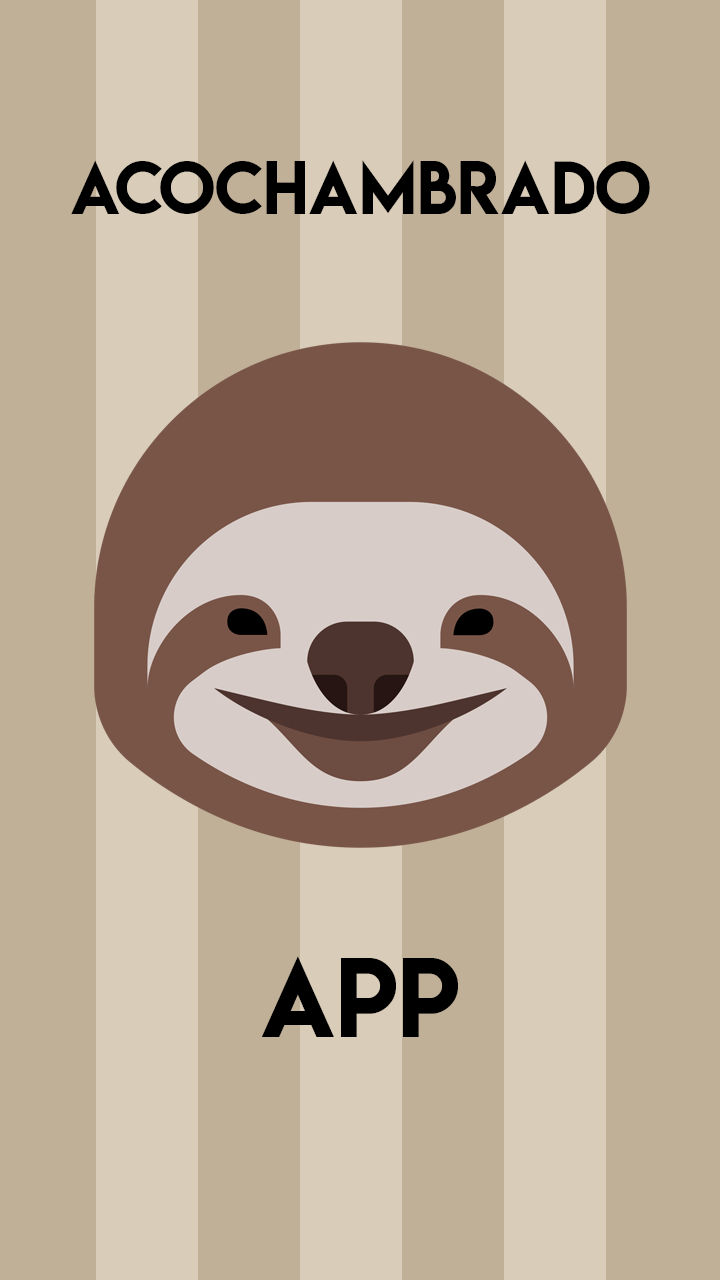
<style>
.page{position:relative;width:720px;height:1280px;background:#c1b098}
.page>*{position:absolute;margin:0}
.t1{font:66.7px "LemonMilk";color:#000000}
.t2{font:100px "LemonMilk";color:#000000}
</style>
<div class="page">
<p class="t1" style="left:71px;top:160px;width:579px;height:54px">Acochambrado</p>
<p class="t2" style="left:261px;top:956px;width:197px;height:81px">App</p>
</div>
